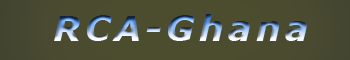
<style>
.page{position:relative;width:350px;height:60px;background:#4c4d2e}
.page>*{position:absolute;margin:0}
.t1{font:35px "Verdana-BoldItalic";letter-spacing:0.12em}
</style>
<div class="page">
<p class="t1" style="left:54px;top:14px;width:253px;height:27px">RCA-Ghana</p>
</div>
